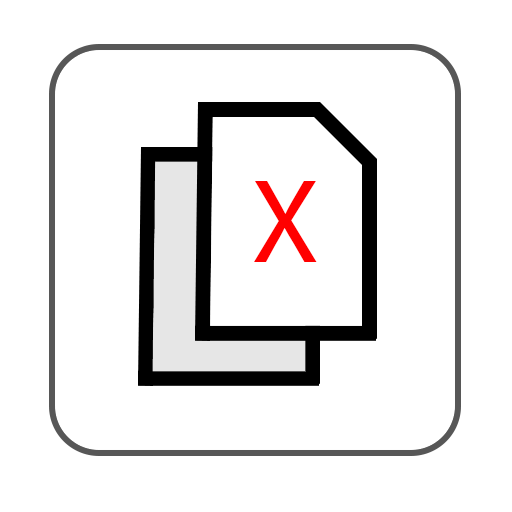
<style>
.page{position:relative;width:512px;height:512px;background:#ffffff}
.page>*{position:absolute;margin:0}
.t1{font:120px "MyriadPro-Regular";color:#ff0000}
</style>
<div class="page">
<p class="t1" style="left:254px;top:181px;width:63px;height:81px">X</p>
</div>
